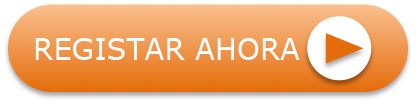
<style>
.page{position:relative;width:416px;height:104px}
.page>*{position:absolute;margin:0}
.t1{font:29.2px "Verdana";color:#ffffff}
</style>
<div class="page">
<p class="t1" style="left:35px;top:38px;width:265px;height:22px">REGISTAR AHORA</p>
</div>
